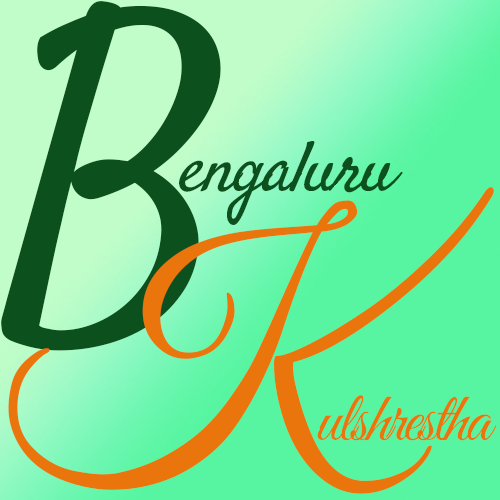
<style>
.page{position:relative;width:500px;height:500px}
.page>*{position:absolute;margin:0}
.t1{font:374.1px "Satisfy-Regular";letter-spacing:-0.04em;color:#0c501e}
.t2{font:71.5px "Satisfy-Regular";letter-spacing:-0.04em;color:#0c501e;font-style:italic}
.t3{font:297.3px "GreatVibes-Regular";letter-spacing:-0.04em;color:#eb750d}
.t4{font:71.5px "GreatVibes-Regular";letter-spacing:-0.04em;color:#eb750d}
</style>
<div class="page">
<p class="t1" style="left:1px;top:1px;width:220px;height:350px">B</p>
<p class="t2" style="left:179px;top:141px;width:224px;height:84px">engaluru</p>
<p class="t3" style="left:8px;top:187px;width:486px;height:307px">K</p>
<p class="t4" style="left:317px;top:395px;width:180px;height:46px">ulshrestha</p>
</div>
